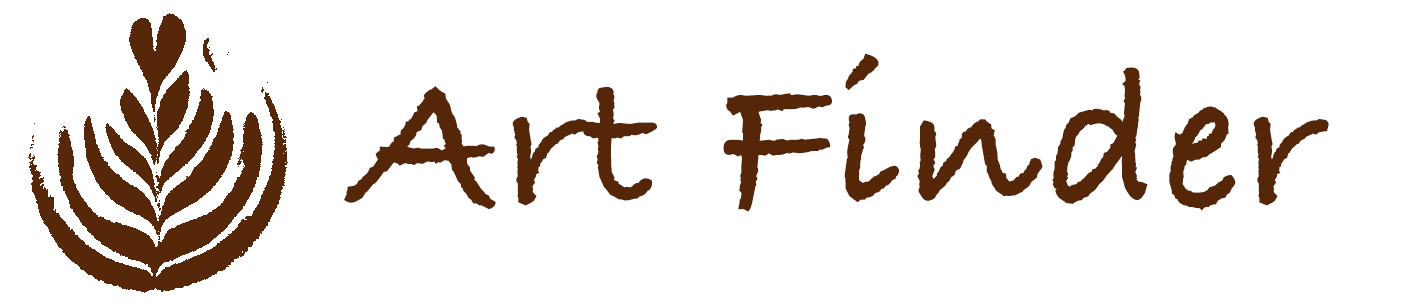
<style>
.page{position:relative;width:1417px;height:304px;background:#ffffff}
.page>*{position:absolute;margin:0}
.t1{font:200px "BradleyHandITCTT-Bold";letter-spacing:0.025em;color:#552708}
</style>
<div class="page">
<p class="t1" style="left:344px;top:53px;width:985px;height:159px">Art Finder</p>
</div>
